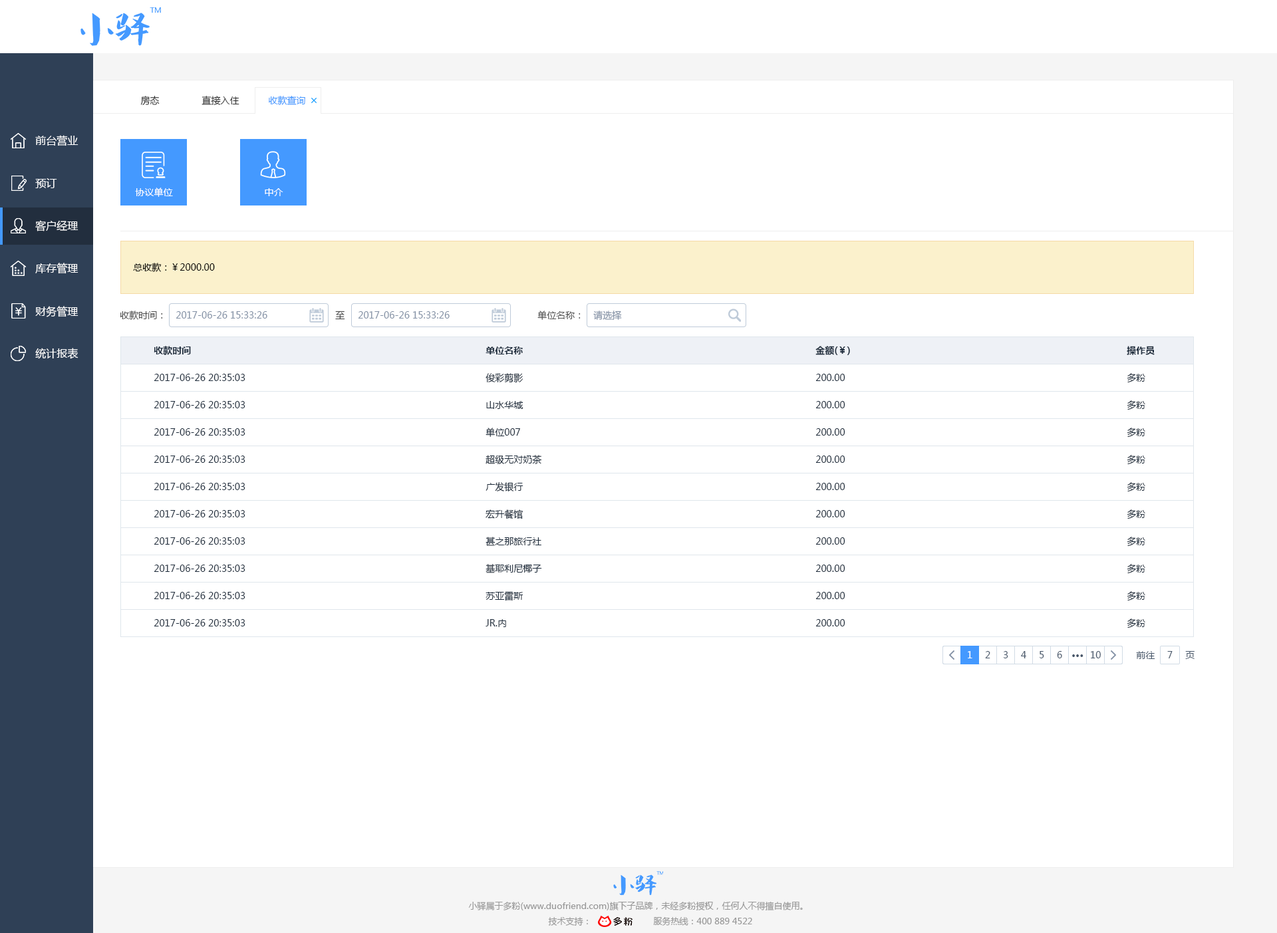
<style>
.page{position:relative;width:1277px;height:933px;background:#ffffff}
.page>*{position:absolute;margin:0}
.t1{font:9.3px "MicrosoftYaHei";color:#333333}
.t2{font:9.3px "MicrosoftYaHei";color:#4499ff}
.t3{font:10.6px "MicrosoftYaHei";color:#ffffff}
.t4{font:9.3px "MicrosoftYaHei";color:#ffffff}
.t5{font:9.3px "MicrosoftYaHei";color:#000000}
.t6{font:9.3px "MicrosoftYaHei";color:#505050}
.t7{font:9.3px "MicrosoftYaHei";color:#8391a5}
.t8{font:9.3px "MicrosoftYaHei-Bold";color:#1f2d3d}
.t9{font:9.3px "MicrosoftYaHei";color:#1f2d3d}
.t10{font:9.3px "MicrosoftYaHei";color:#48576a}
.t11{font:9.3px "MicrosoftYaHei-Bold";color:#48576a}
.t12{font:8.6px "MicrosoftYaHei";color:#999999}
</style>
<div class="page">
<p class="t1" style="left:140px;top:96px;width:20px;height:9px">房态</p>
<p class="t1" style="left:202px;top:96px;width:38px;height:9px">直接入住</p>
<p class="t2" style="left:269px;top:96px;width:36px;height:9px">收款查询</p>
<p class="t3" style="left:35px;top:135px;width:44px;height:11px">前台营业</p>
<p class="t3" style="left:35px;top:178px;width:22px;height:10px">预订</p>
<p class="t4" style="left:135px;top:188px;width:38px;height:9px">协议单位</p>
<p class="t4" style="left:265px;top:188px;width:18px;height:8px">中介</p>
<p class="t3" style="left:35px;top:220px;width:44px;height:12px">客户经理</p>
<p class="t3" style="left:35px;top:263px;width:44px;height:11px">库存管理</p>
<p class="t5" style="left:133px;top:263px;width:82px;height:9px">总收款：￥2000.00</p>
<p class="t3" style="left:35px;top:306px;width:44px;height:11px">财务管理</p>
<p class="t6" style="left:120px;top:311px;width:43px;height:9px">收款时间：</p>
<p class="t7" style="left:176px;top:311px;width:91px;height:8px">2017-06-26 15:33:26</p>
<p class="t6" style="left:335px;top:311px;width:10px;height:9px">至</p>
<p class="t7" style="left:358px;top:311px;width:92px;height:8px">2017-06-26 15:33:26</p>
<p class="t6" style="left:538px;top:311px;width:43px;height:9px">单位名称：</p>
<p class="t7" style="left:593px;top:311px;width:29px;height:9px">请选择</p>
<p class="t3" style="left:35px;top:348px;width:44px;height:11px">统计报表</p>
<p class="t8" style="left:154px;top:346px;width:37px;height:9px">收款时间</p>
<p class="t8" style="left:486px;top:347px;width:37px;height:8px">单位名称</p>
<p class="t8" style="left:816px;top:346px;width:34px;height:9px">金额(￥)</p>
<p class="t8" style="left:1127px;top:346px;width:28px;height:9px">操作员</p>
<p class="t9" style="left:154px;top:374px;width:92px;height:7px">2017-06-26 20:35:03</p>
<p class="t9" style="left:486px;top:373px;width:37px;height:10px">俊彩剪影</p>
<p class="t9" style="left:816px;top:374px;width:30px;height:7px">200.00</p>
<p class="t9" style="left:1127px;top:373px;width:19px;height:10px">多粉</p>
<p class="t9" style="left:154px;top:401px;width:92px;height:8px">2017-06-26 20:35:03</p>
<p class="t9" style="left:486px;top:401px;width:38px;height:8px">山水华城</p>
<p class="t9" style="left:816px;top:401px;width:30px;height:8px">200.00</p>
<p class="t9" style="left:1127px;top:401px;width:19px;height:10px">多粉</p>
<p class="t9" style="left:154px;top:428px;width:92px;height:8px">2017-06-26 20:35:03</p>
<p class="t9" style="left:486px;top:428px;width:34px;height:9px">单位007</p>
<p class="t9" style="left:816px;top:428px;width:30px;height:8px">200.00</p>
<p class="t9" style="left:1127px;top:428px;width:19px;height:10px">多粉</p>
<p class="t9" style="left:154px;top:456px;width:92px;height:7px">2017-06-26 20:35:03</p>
<p class="t9" style="left:486px;top:455px;width:56px;height:9px">超级无对奶茶</p>
<p class="t9" style="left:816px;top:456px;width:30px;height:7px">200.00</p>
<p class="t9" style="left:1127px;top:455px;width:19px;height:10px">多粉</p>
<p class="t9" style="left:154px;top:483px;width:92px;height:7px">2017-06-26 20:35:03</p>
<p class="t9" style="left:486px;top:482px;width:38px;height:10px">广发银行</p>
<p class="t9" style="left:816px;top:483px;width:30px;height:7px">200.00</p>
<p class="t9" style="left:1127px;top:482px;width:19px;height:10px">多粉</p>
<p class="t9" style="left:486px;top:510px;width:37px;height:10px">宏升餐馆</p>
<p class="t9" style="left:1127px;top:510px;width:19px;height:10px">多粉</p>
<p class="t9" style="left:154px;top:510px;width:92px;height:8px">2017-06-26 20:35:03</p>
<p class="t9" style="left:816px;top:510px;width:30px;height:8px">200.00</p>
<p class="t9" style="left:154px;top:538px;width:92px;height:7px">2017-06-26 20:35:03</p>
<p class="t9" style="left:486px;top:537px;width:56px;height:9px">甚之那旅行社</p>
<p class="t9" style="left:816px;top:538px;width:30px;height:7px">200.00</p>
<p class="t9" style="left:1127px;top:537px;width:19px;height:10px">多粉</p>
<p class="t9" style="left:154px;top:565px;width:92px;height:7px">2017-06-26 20:35:03</p>
<p class="t9" style="left:486px;top:564px;width:56px;height:10px">基耶利尼椰子</p>
<p class="t9" style="left:816px;top:565px;width:30px;height:7px">200.00</p>
<p class="t9" style="left:1127px;top:564px;width:19px;height:10px">多粉</p>
<p class="t9" style="left:154px;top:592px;width:92px;height:7px">2017-06-26 20:35:03</p>
<p class="t9" style="left:486px;top:591px;width:38px;height:10px">苏亚雷斯</p>
<p class="t9" style="left:816px;top:592px;width:30px;height:7px">200.00</p>
<p class="t9" style="left:1127px;top:591px;width:19px;height:10px">多粉</p>
<p class="t9" style="left:154px;top:619px;width:92px;height:8px">2017-06-26 20:35:03</p>
<p class="t9" style="left:486px;top:619px;width:20px;height:8px">JR.内</p>
<p class="t9" style="left:816px;top:619px;width:30px;height:8px">200.00</p>
<p class="t9" style="left:1127px;top:619px;width:19px;height:10px">多粉</p>
<p class="t4" style="left:968px;top:651px;width:5px;height:8px">1</p>
<p class="t10" style="left:985px;top:651px;width:6px;height:8px">2</p>
<p class="t10" style="left:1003px;top:651px;width:6px;height:8px">3</p>
<p class="t10" style="left:1021px;top:651px;width:6px;height:8px">4</p>
<p class="t10" style="left:1040px;top:651px;width:5px;height:8px">5</p>
<p class="t10" style="left:1057px;top:651px;width:6px;height:8px">6</p>
<p class="t10" style="left:1091px;top:651px;width:10px;height:8px">10</p>
<p class="t10" style="left:1136px;top:651px;width:20px;height:8px">前往</p>
<p class="t10" style="left:1168px;top:651px;width:5px;height:8px">7</p>
<p class="t10" style="left:1186px;top:651px;width:9px;height:8px">页</p>
<p class="t11" style="left:1073px;top:655px;width:11px;height:2px">···</p>
<p class="t12" style="left:468px;top:902px;width:335px;height:9px">小驿属于多粉(www.duofriend.com)旗下子品牌，未经多粉授权，任何人不得擅自使用。</p>
<p class="t12" style="left:548px;top:917px;width:40px;height:9px">技术支持：</p>
<p class="t12" style="left:653px;top:917px;width:99px;height:9px">服务热线：400 889 4522</p>
</div>
